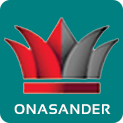
<style>
.page{position:relative;width:123px;height:123px;background:#008080}
.page>*{position:absolute;margin:0}
.t1{font:14px "Sansation-Bold";letter-spacing:0.05em;color:#ffffff}
</style>
<div class="page">
<p class="t1" style="left:14px;top:104px;width:97px;height:10px">ONASANDER</p>
</div>
